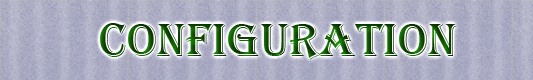
<style>
.page{position:relative;width:533px;height:80px}
.page>*{position:absolute;margin:0}
.t1{font:48px "Algerian"}
</style>
<div class="page">
<p class="t1" style="left:100px;top:23px;width:357px;height:37px">configuration</p>
</div>
